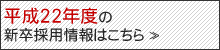
<style>
.page{position:relative;width:220px;height:50px;background:#ffffff}
.page>*{position:absolute;margin:0}
.t1{font:15px "DFGothicP-W5-WING-RKSJ-H";color:#252525}
.t2{font:18px "DFGothicP-W5-WING-RKSJ-H";color:#c60000}
.t3{font:10px "DFGothicP-W5-WING-RKSJ-H";color:#252525}
</style>
<div class="page">
<p class="t1" style="left:4px;top:7px;width:155px;height:35px"><span class="t2">平成22年度</span>の<br>新卒採用情報はこちら <span class="t3">≫</span></p>
</div>
